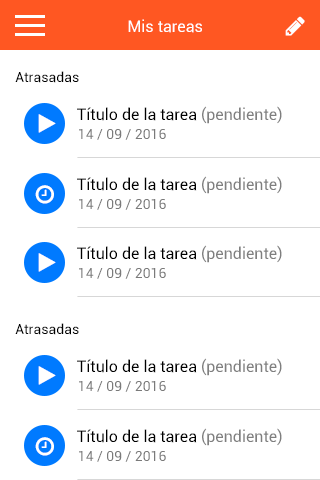
<style>
.page{position:relative;width:320px;height:480px;background:#ffffff}
.page>*{position:absolute;margin:0}
.t1{font:16px "Roboto-Regular";color:#ffffff}
.t2{font:14px "Roboto-Regular";color:#000000}
.t3{font:16px "Roboto-Regular";color:#000000}
.t4{font:16px "Roboto-Regular";color:#7f7f7f}
.t5{font:14px "Roboto-Regular";color:#7b7b7b}
</style>
<div class="page">
<p class="t1" style="left:128px;top:19px;width:74px;height:14px">Mis tareas</p>
<p class="t2" style="left:15px;top:71px;width:64px;height:12px">Atrasadas</p>
<p class="t3" style="left:77px;top:106px;width:205px;height:18px">Título de la tarea<span class="t4"> (pendiente)</span></p>
<p class="t5" style="left:79px;top:129px;width:87px;height:11px">14 / 09 / 2016</p>
<p class="t3" style="left:77px;top:176px;width:205px;height:18px">Título de la tarea<span class="t4"> (pendiente)</span></p>
<p class="t5" style="left:79px;top:199px;width:87px;height:11px">14 / 09 / 2016</p>
<p class="t3" style="left:77px;top:245px;width:205px;height:18px">Título de la tarea<span class="t4"> (pendiente)</span></p>
<p class="t5" style="left:79px;top:268px;width:87px;height:11px">14 / 09 / 2016</p>
<p class="t2" style="left:15px;top:323px;width:64px;height:12px">Atrasadas</p>
<p class="t3" style="left:77px;top:358px;width:205px;height:18px">Título de la tarea<span class="t4"> (pendiente)</span></p>
<p class="t5" style="left:79px;top:381px;width:87px;height:11px">14 / 09 / 2016</p>
<p class="t3" style="left:77px;top:428px;width:205px;height:18px">Título de la tarea<span class="t4"> (pendiente)</span></p>
<p class="t5" style="left:79px;top:451px;width:87px;height:11px">14 / 09 / 2016</p>
</div>
